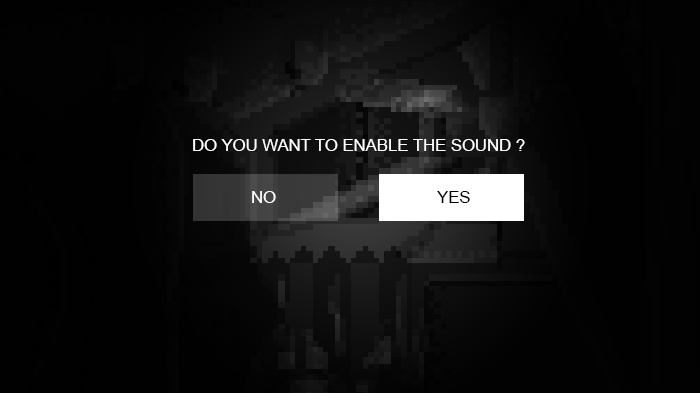
<style>
.page{position:relative;width:700px;height:393px;background:#010101}
.page>*{position:absolute;margin:0}
.t1{font:16.7px "ArialMT";color:#ffffff;text-transform:uppercase}
.t2{font:16.7px "ArialMT";color:#000000;text-transform:uppercase}
</style>
<div class="page">
<p class="t1" style="left:193px;top:139px;width:332px;height:12px">DO YOU WANT TO ENABLE THE SOUND ?</p>
<p class="t1" style="left:252px;top:191px;width:24px;height:12px">No</p>
<p class="t2" style="left:437px;top:191px;width:33px;height:12px">YES</p>
</div>
